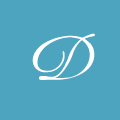
<style>
.page{position:relative;width:120px;height:120px;background:#4da4bf}
.page>*{position:absolute;margin:0}
.t1{font:65.5px "HenryMorganHand";color:#ffffff;scale:1.14 1}
</style>
<div class="page">
<p class="t1" style="left:32px;top:33px;width:63px;height:47px">D</p>
</div>
